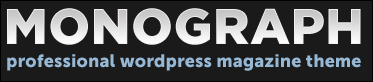
<style>
.page{position:relative;width:373px;height:82px;background:#1a1a1a}
.page>*{position:absolute;margin:0}
.t1{font:50px "GothamBlack";letter-spacing:0.02em;color:#e3e3e3}
.t2{font:17.8px "MuseoSans-900";letter-spacing:0.01em;color:#96b8d5}
</style>
<div class="page">
<p class="t1" style="left:7px;top:8px;width:354px;height:37px">MONOGRAPH</p>
<p class="t2" style="left:7px;top:54px;width:354px;height:17px">professional wordpress magazine theme</p>
</div>
